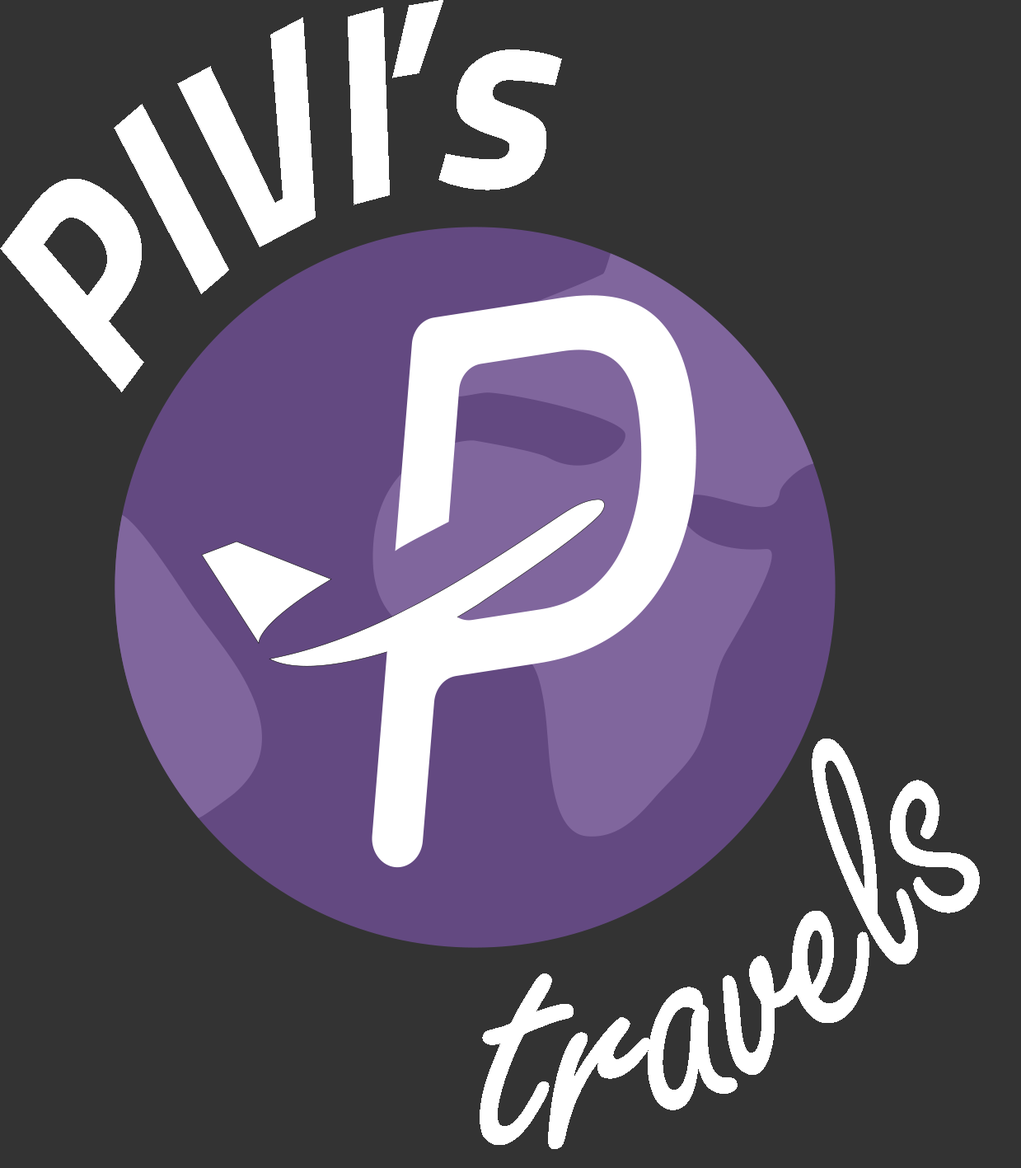
<style>
.page{position:relative;width:1021px;height:1168px;background:#333333}
.page>*{position:absolute;margin:0}
.t1{font:269.5px "TitilliumWeb-BoldItalic";letter-spacing:-0.08em;color:#ffffff}
.t2{font:269.5px "TitilliumWeb-BoldItalic";color:#ffffff}
.t3{font:341.2px "FreestyleScript-Regular";color:#ffffff;scale:1.05 1}
</style>
<div class="page">
<p class="t1" style="left:0px;top:0px;width:562px;height:392px"><span class="t2">        </span>PIVI<span class="t2">’s</span></p>
<p class="t3" style="left:480px;top:738px;width:500px;height:411px;rotate:163deg">travels</p>
</div>
